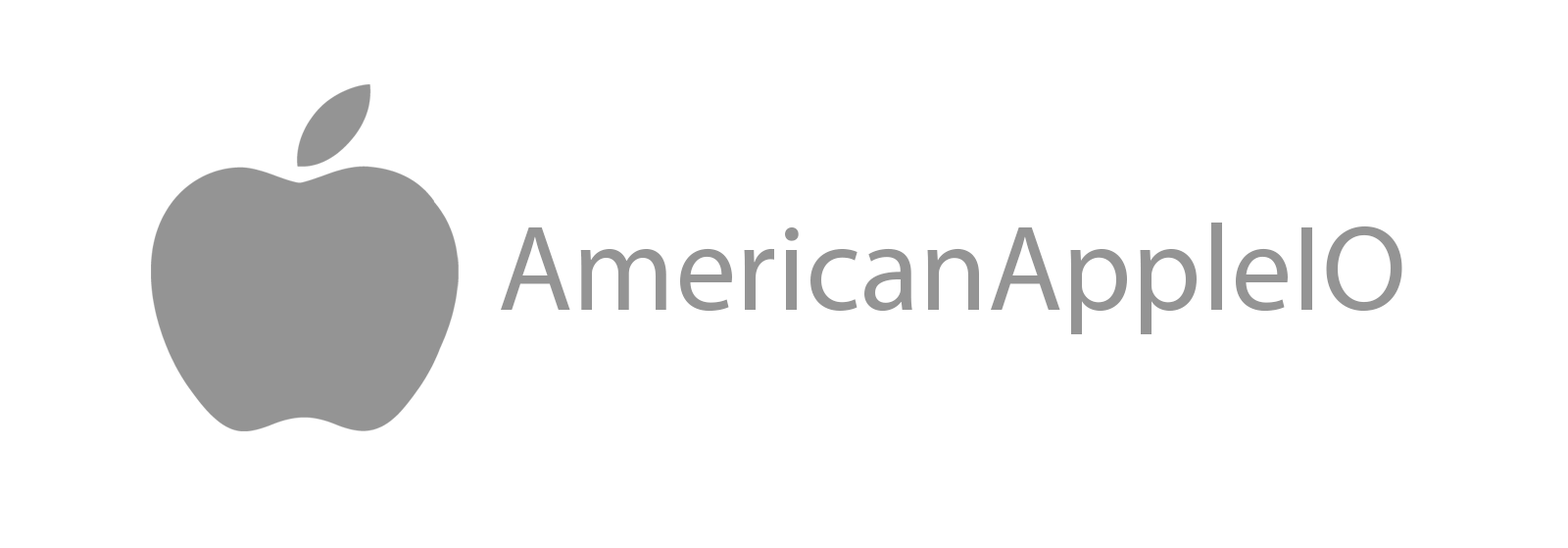
<style>
.page{position:relative;width:1568px;height:548px;background:#ffffff}
.page>*{position:absolute;margin:0}
.t1{font:122.5px "MyriadPro-Regular";color:#949494}
</style>
<div class="page">
<p class="t1" style="left:501px;top:222px;width:901px;height:112px">AmericanAppleIO</p>
</div>
